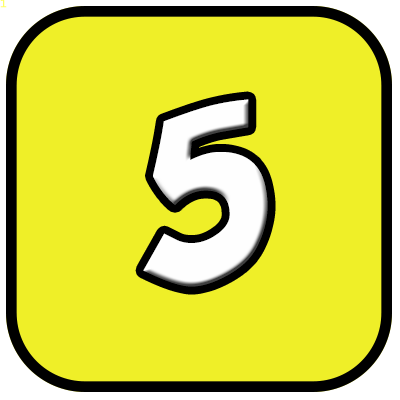
<style>
.page{position:relative;width:400px;height:400px;background:#efef28}
.page>*{position:absolute;margin:0}
.t1{font:10.7px "LucidaConsole";color:#ffff66}
.t2{font:240px "Yikes";color:#fefefe}
</style>
<div class="page">
<p class="t1" style="left:0px;top:0px;width:7px;height:8px">1</p>
<p class="t2" style="left:143px;top:99px;width:125px;height:188px">5</p>
</div>
